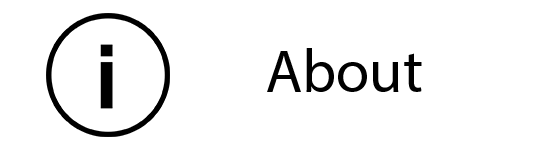
<style>
.page{position:relative;width:540px;height:150px;background:#ffffff}
.page>*{position:absolute;margin:0}
.t1{font:60.4px "MyriadPro-Regular";color:#000000}
</style>
<div class="page">
<p class="t1" style="left:267px;top:48px;width:155px;height:44px">About</p>
</div>
